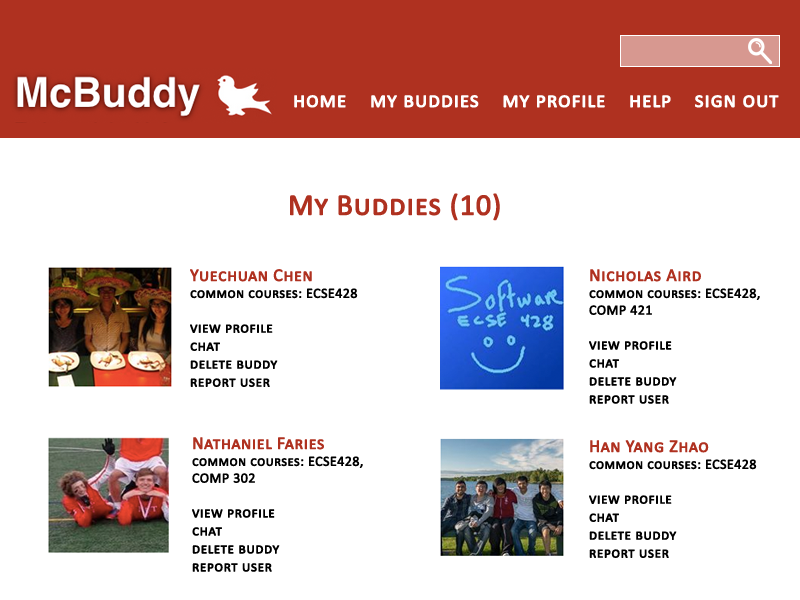
<style>
.page{position:relative;width:800px;height:600px;background:#ffffff}
.page>*{position:absolute;margin:0}
.t1{font:22px "Calibri";letter-spacing:0.005em;color:#ffffff;font-variant:small-caps;font-weight:bold}
.t2{font:30px "Calibri";letter-spacing:0.005em;color:#af3120;font-variant:small-caps;font-weight:bold}
.t3{font:15px "Calibri";letter-spacing:0.005em;color:#000000;font-variant:small-caps;font-weight:bold}
.t4{font:18px "Calibri";letter-spacing:0.005em;color:#af3120;font-variant:small-caps;font-weight:bold}
.t5{font:14px "Calibri";letter-spacing:0.005em;color:#000000;font-variant:small-caps;font-weight:bold}
</style>
<div class="page">
<p class="t1" style="left:294px;top:95px;width:485px;height:13px">home    my buddies    my profile    help    sign out</p>
<p class="t2" style="left:290px;top:193px;width:210px;height:28px">My Buddies (10)</p>
<p class="t3" style="left:190px;top:269px;width:168px;height:118px"><span class="t4">Yuechuan Chen<br></span><span class="t5">common courses: ECSE428<br><br></span>view profile<br>chat<br>delete buddy<br>report user</p>
<p class="t3" style="left:589px;top:269px;width:171px;height:135px"><span class="t4">Nicholas Aird<br></span><span class="t5">common courses: ECSE428,<br>COMP 421<br><br></span>view profile<br>chat<br>delete buddy<br>report user</p>
<p class="t3" style="left:192px;top:437px;width:171px;height:135px"><span class="t4">Nathaniel Faries<br></span><span class="t5">common courses: ECSE428,<br>COMP 302 <br><br></span>view profile<br>chat<br>delete buddy<br>report user</p>
<p class="t3" style="left:589px;top:440px;width:168px;height:118px"><span class="t4">Han Yang Zhao<br></span><span class="t5">common courses: ECSE428<br><br></span>view profile<br>chat<br>delete buddy<br>report user</p>
</div>
